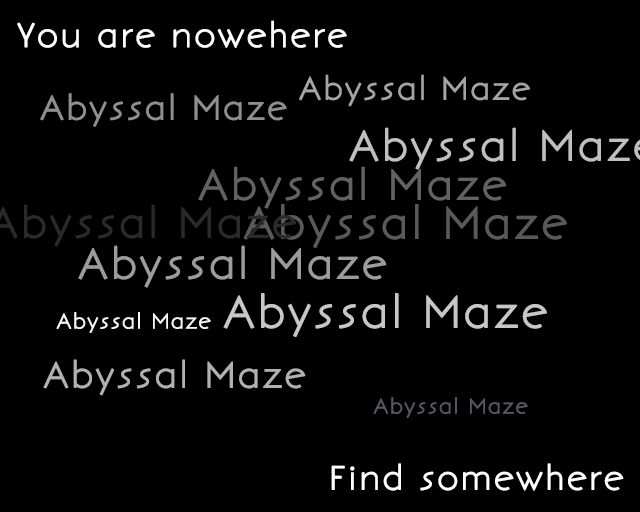
<style>
.page{position:relative;width:640px;height:512px;background:#000000}
.page>*{position:absolute;margin:0}
.t1{font:32px "BonvenoCF-Light";color:#ffffff;font-weight:bold}
.t2{font:30px "BonvenoCF-Light";color:#a4a4a4;font-weight:bold}
.t3{font:32px "BonvenoCF-Light";color:#8f8f8f;font-weight:bold}
.t4{font:40px "BonvenoCF-Light";color:#626262;font-weight:bold}
.t5{font:42px "BonvenoCF-Light";color:#595959;font-weight:bold}
.t6{font:40px "BonvenoCF-Light";color:#9c9c9c;font-weight:bold}
.t7{font:42px "BonvenoCF-Light";color:#c8c7c7;font-weight:bold}
.t8{font:20px "BonvenoCF-Light";color:#f7f5f5;font-weight:bold}
.t9{font:34px "BonvenoCF-Light";color:#b1b1b1;font-weight:bold}
.t10{font:20px "BonvenoCF-Light";color:#57585c;font-weight:bold}
</style>
<div class="page">
<p class="t1" style="left:17px;top:20px;width:330px;height:28px">You are nowehere</p>
<p class="t2" style="left:299px;top:74px;width:231px;height:33px">Abyssal Maze</p>
<p class="t3" style="left:40px;top:93px;width:247px;height:34px">Abyssal Maze</p>
<p class="t4" style="left:198px;top:166px;width:309px;height:43px">Abyssal Maze</p>
<p class="t5" style="left:243px;top:204px;width:324px;height:44px">Abyssal Maze</p>
<p class="t6" style="left:78px;top:245px;width:309px;height:43px">Abyssal Maze</p>
<p class="t7" style="left:223px;top:293px;width:324px;height:44px">Abyssal Maze</p>
<p class="t8" style="left:56px;top:312px;width:155px;height:21px">Abyssal Maze</p>
<p class="t9" style="left:43px;top:359px;width:263px;height:37px">Abyssal Maze</p>
<p class="t10" style="left:373px;top:397px;width:155px;height:21px">Abyssal Maze</p>
<p class="t1" style="left:331px;top:463px;width:293px;height:28px">Find somewhere</p>
</div>
